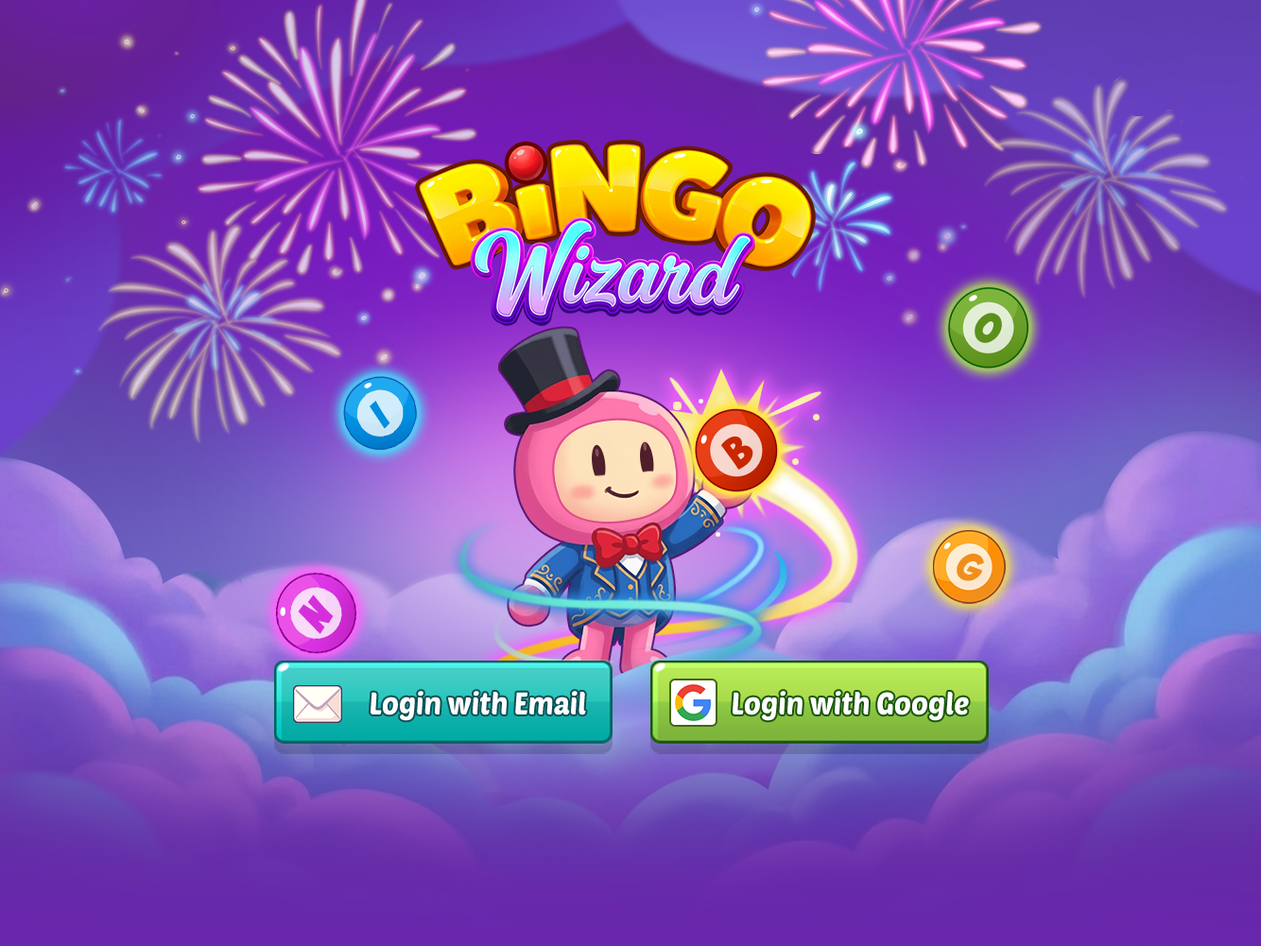
<style>
.page{position:relative;width:1261px;height:946px}
.page>*{position:absolute;margin:0}
.t1{font:30.9px "TypoPRO-PoetsenOne-Regular";color:#ffffff;scale:0.92 1}
</style>
<div class="page">
<p class="t1" style="left:370px;top:691px;width:216px;height:30px">Login with Email</p>
<p class="t1" style="left:732px;top:691px;width:237px;height:30px">Login with Google</p>
</div>
